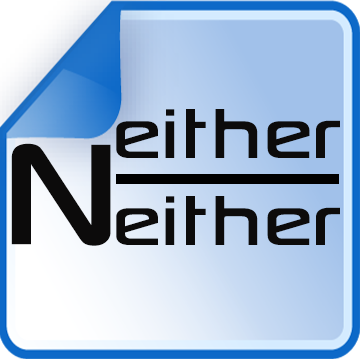
<style>
.page{position:relative;width:360px;height:360px}
.page>*{position:absolute;margin:0}
.t1{font:100px "SonySketchEF";color:#0c0b0b}
.t2{font:205px "SonySketchEF";color:#0c0b0b}
</style>
<div class="page">
<p class="t1" style="left:116px;top:109px;width:224px;height:49px">either</p>
<p class="t2" style="left:11px;top:143px;width:100px;height:103px">N</p>
<p class="t1" style="left:116px;top:196px;width:224px;height:49px">either</p>
</div>
